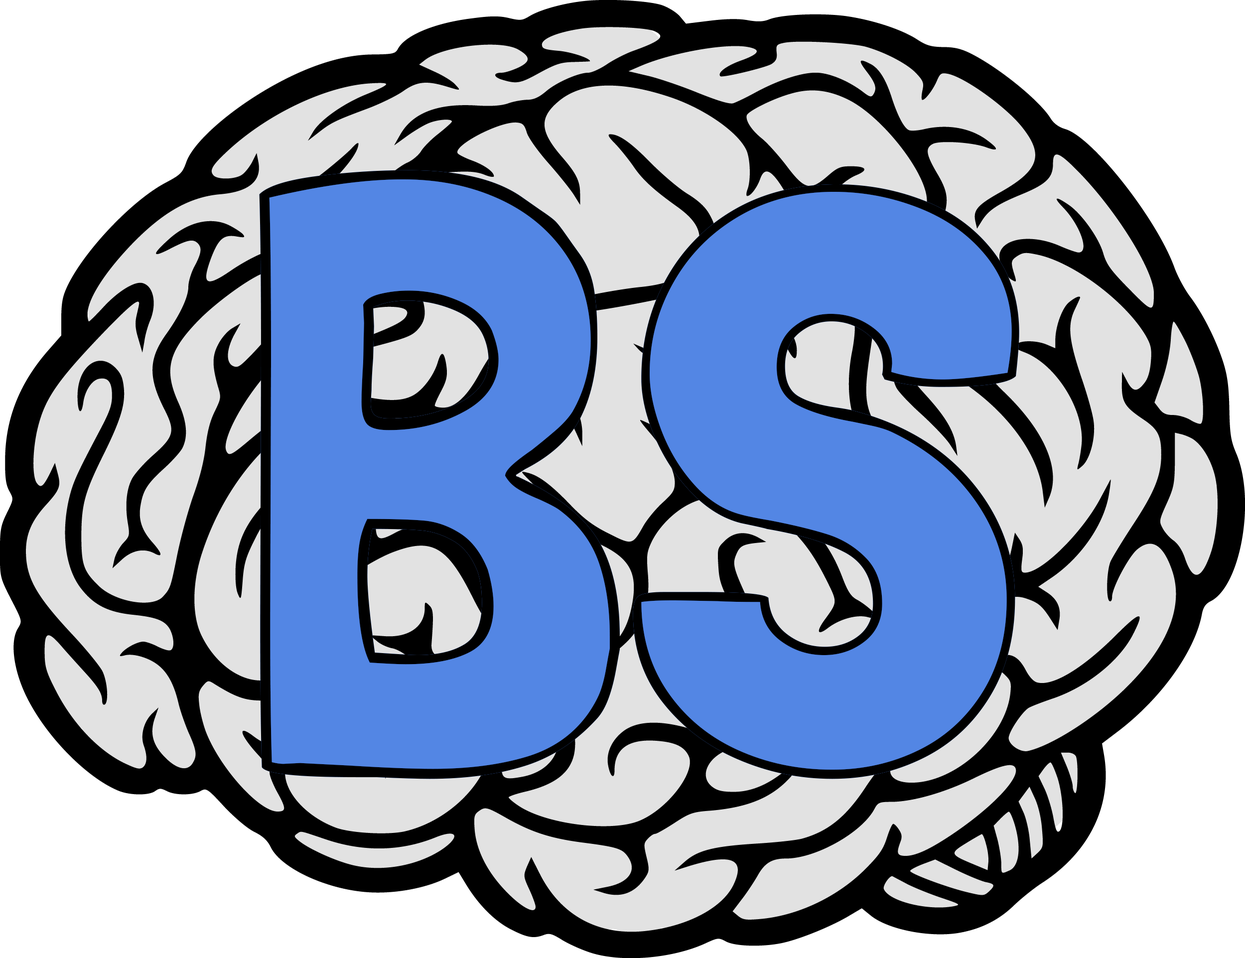
<style>
.page{position:relative;width:1245px;height:958px;background:#e2e2e2}
.page>*{position:absolute;margin:0}
.t1{font:830.2px "LondrinaOutline-Regular";color:#000000}
</style>
<div class="page">
<p class="t1" style="left:259px;top:170px;width:760px;height:609px">BS</p>
</div>
